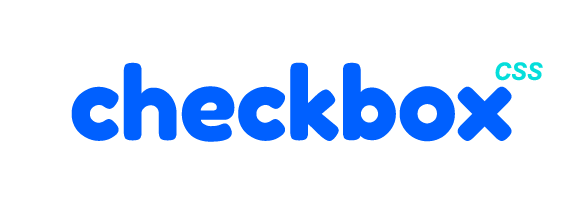
<style>
.page{position:relative;width:583px;height:202px;background:#ffffff}
.page>*{position:absolute;margin:0}
.t1{font:100px "FredokaOne-Regular";letter-spacing:-0.01em;color:#0060ff}
.t2{font:24px "Arial-BoldItalicMT";letter-spacing:-0.01em;color:#05dedb}
</style>
<div class="page">
<p class="t1" style="left:71px;top:62px;width:441px;height:80px">checkbox</p>
<p class="t2" style="left:495px;top:62px;width:48px;height:19px">CSS</p>
</div>
